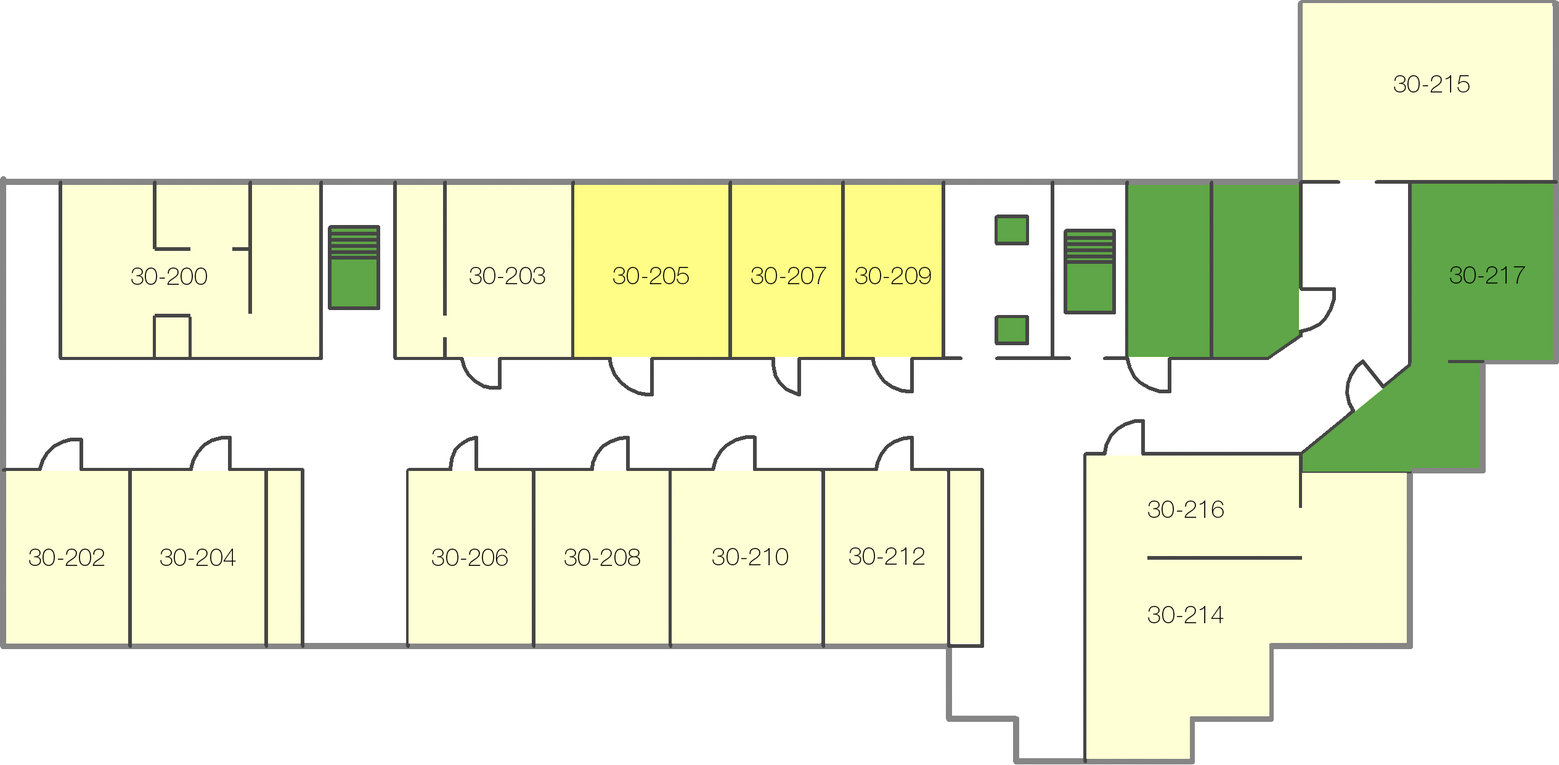
<style>
.page{position:relative;width:1559px;height:765px;background:#ffffff}
.page>*{position:absolute;margin:0}
.t1{font:24.7px "HelveticaNeueCyr-Thin";color:#000000;font-variant:small-caps}
</style>
<div class="page">
<p class="t1" style="left:1394px;top:75px;width:76px;height:17px">30-215</p>
<p class="t1" style="left:131px;top:267px;width:76px;height:18px">30-200</p>
<p class="t1" style="left:470px;top:267px;width:75px;height:17px">30-203</p>
<p class="t1" style="left:613px;top:267px;width:76px;height:17px">30-205</p>
<p class="t1" style="left:751px;top:267px;width:75px;height:17px">30-207</p>
<p class="t1" style="left:855px;top:267px;width:76px;height:17px">30-209</p>
<p class="t1" style="left:1450px;top:266px;width:75px;height:17px">30-217</p>
<p class="t1" style="left:1148px;top:500px;width:76px;height:18px">30-216</p>
<p class="t1" style="left:29px;top:548px;width:76px;height:18px">30-202</p>
<p class="t1" style="left:160px;top:548px;width:76px;height:18px">30-204</p>
<p class="t1" style="left:432px;top:548px;width:76px;height:18px">30-206</p>
<p class="t1" style="left:565px;top:548px;width:75px;height:18px">30-208</p>
<p class="t1" style="left:712px;top:548px;width:76px;height:17px">30-210</p>
<p class="t1" style="left:849px;top:547px;width:76px;height:18px">30-212</p>
<p class="t1" style="left:1148px;top:606px;width:76px;height:17px">30-214</p>
</div>
